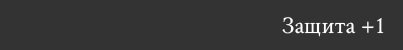
<style>
.page{position:relative;width:403px;height:50px;background:#333333}
.page>*{position:absolute;margin:0}
.t1{font:24px "CrimsonText-Regular";color:#ffffff}
</style>
<div class="page">
<p class="t1" style="left:282px;top:17px;width:102px;height:20px">Защита +1</p>
</div>
